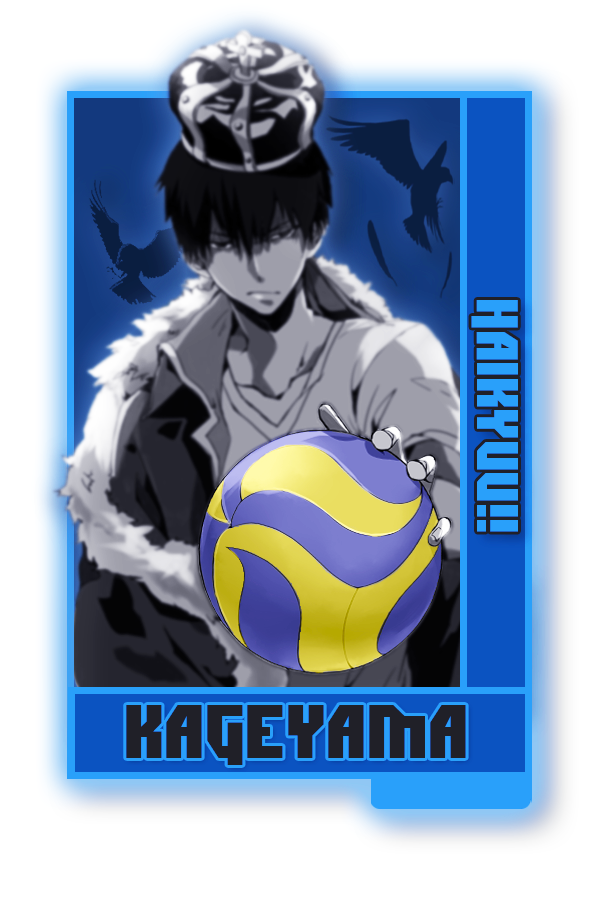
<style>
.page{position:relative;width:600px;height:900px}
.page>*{position:absolute;margin:0}
.t1{font:58.3px "Dimitri";color:#29a0fa}
.t2{font:75px "Dimitri";color:#252525}
</style>
<div class="page">
<p class="t1" style="left:471px;top:300px;width:47px;height:232px;rotate:90deg">HAIKYUU!!</p>
<p class="t2" style="left:126px;top:705px;width:340px;height:60px">KAGEYAMA</p>
</div>
